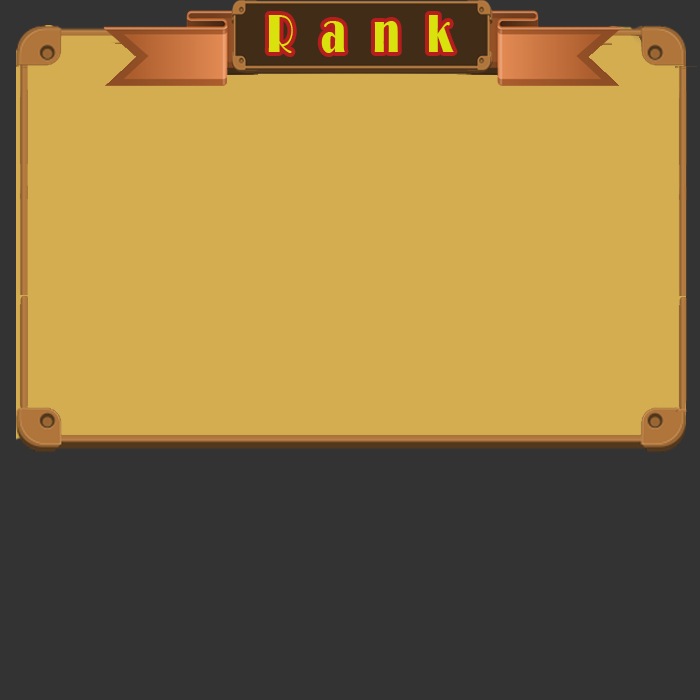
<style>
.page{position:relative;width:700px;height:700px;background:#d5ad51}
.page>*{position:absolute;margin:0}
.t1{font:55.8px "Broadway";letter-spacing:0.8em;color:#dae20d;scale:0.62 1}
</style>
<div class="page">
<p class="t1" style="left:268px;top:15px;width:186px;height:38px">Rank</p>
</div>
